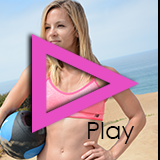
<style>
.page{position:relative;width:160px;height:160px}
.page>*{position:absolute;margin:0}
.t1{font:24px "CenturyGothic";color:#000000}
</style>
<div class="page">
<p class="t1" style="left:88px;top:122px;width:46px;height:22px">Play</p>
</div>
